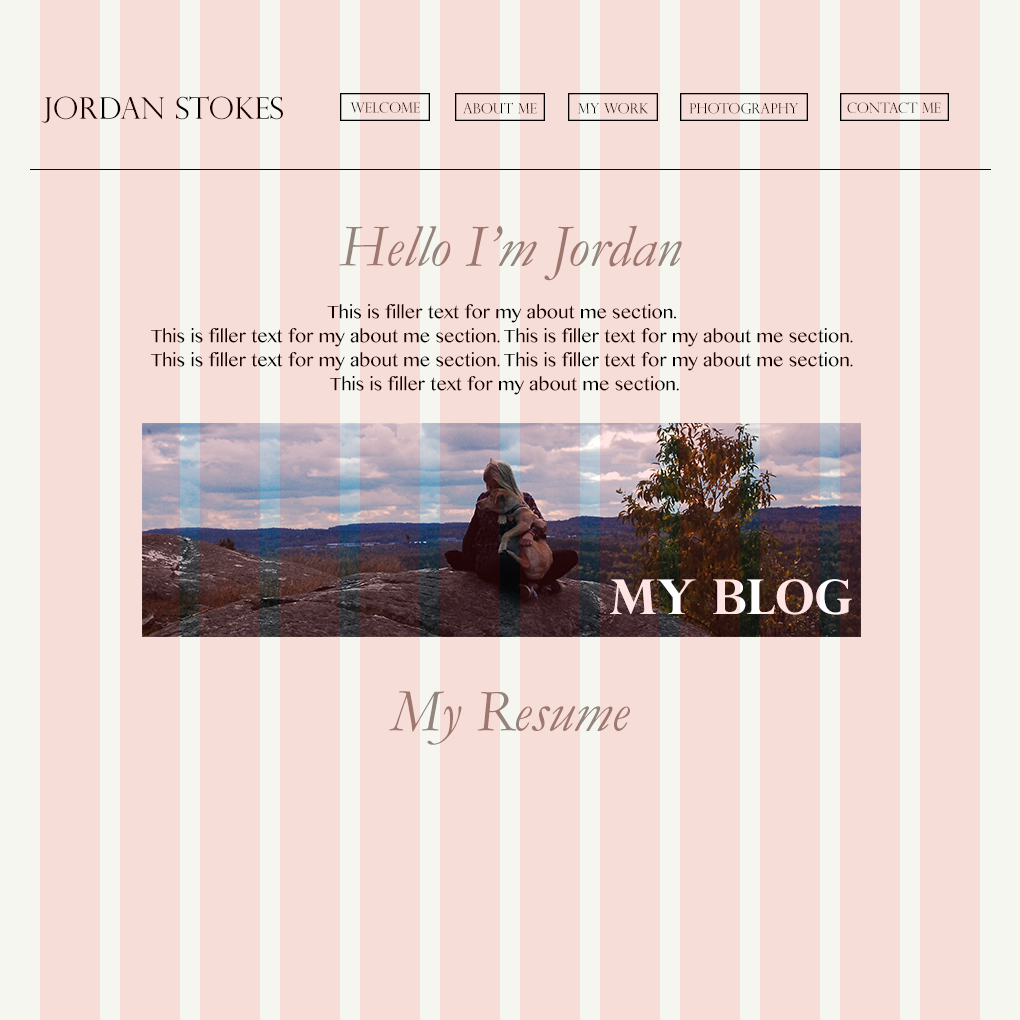
<style>
.page{position:relative;width:1020px;height:1020px;background:#f7ddd8}
.page>*{position:absolute;margin:0}
.t1{font:30px "PerpetuaTitlingMT-Light";color:#1a0000}
.t2{font:14px "PerpetuaTitlingMT-Light";color:#1a0000}
.t3{font:14px "PerpetuaTitlingMT-Light"}
.t4{font:60px "Garamond-Italic";color:#93857c}
.t5{font:18px/24px "TamilMN";color:#1a0000}
.t6{font:48px "PerpetuaTitlingMT-Bold"}
</style>
<div class="page">
<p class="t1" style="left:41px;top:96px;width:242px;height:27px">Jordan Stokes</p>
<p class="t2" style="left:350px;top:102px;width:70px;height:11px">Welcome</p>
<p class="t3" style="left:463px;top:102px;width:74px;height:12px">About me</p>
<p class="t2" style="left:689px;top:102px;width:110px;height:12px">photography</p>
<p class="t2" style="left:847px;top:102px;width:94px;height:11px">contact me</p>
<p class="t3" style="left:578px;top:103px;width:71px;height:11px">My work</p>
<p class="t4" style="left:339px;top:225px;width:343px;height:56px">Hello I’m Jordan</p>
<p class="t5" style="left:151px;top:304px;width:702px;height:91px;text-align:center">This is filler text for my about me section. <br>This is filler text for my about me section. This is filler text for my about me section. <br>This is filler text for my about me section. This is filler text for my about me section. <br>This is filler text for my about me section.</p>
<p class="t6" style="left:610px;top:579px;width:242px;height:36px">My Blog</p>
<p class="t4" style="left:389px;top:691px;width:241px;height:54px">My Resume</p>
</div>
